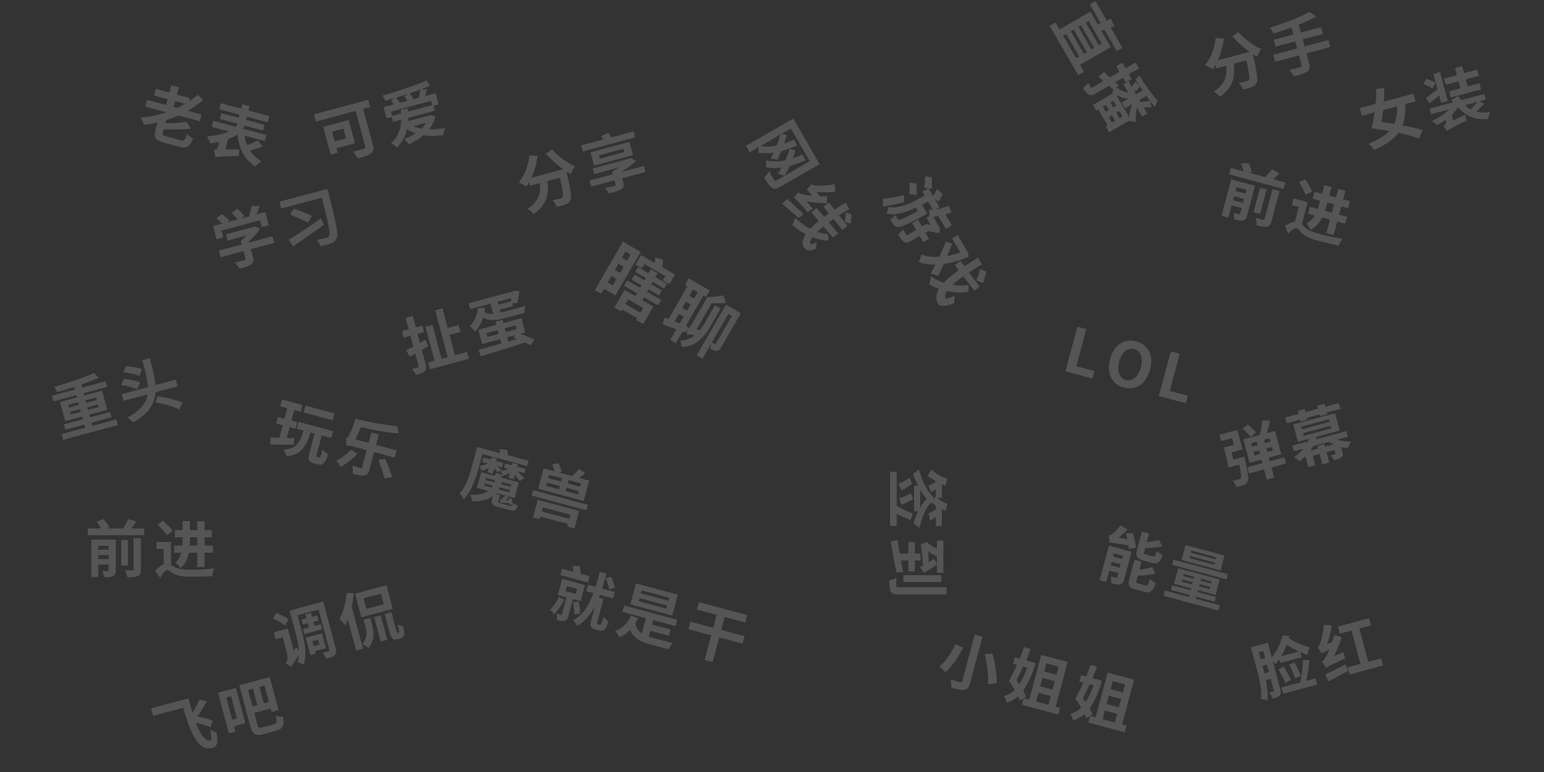
<style>
.page{position:relative;width:1544px;height:772px;background:#333333}
.page>*{position:absolute;margin:0}
.t1{font:62.3px "NotoSansHans-Bold";letter-spacing:0.1em;color:#555555}
.t2{font:69.9px "NotoSansHans-Bold";letter-spacing:0.1em;color:#555555}
</style>
<div class="page">
<p class="t1" style="left:1049px;top:1px;width:109px;height:132px;rotate:60deg">直播</p>
<p class="t1" style="left:1205px;top:12px;width:126px;height:85px;rotate:-15deg">分手</p>
<p class="t1" style="left:1360px;top:66px;width:131px;height:85px;rotate:-15deg">女装</p>
<p class="t1" style="left:141px;top:85px;width:128px;height:82px;rotate:15deg">老表</p>
<p class="t1" style="left:313px;top:80px;width:133px;height:79px;rotate:-15deg">可爱</p>
<p class="t1" style="left:746px;top:118px;width:106px;height:133px;rotate:60deg">网线</p>
<p class="t1" style="left:519px;top:131px;width:127px;height:84px;rotate:-15deg">分享</p>
<p class="t1" style="left:1222px;top:163px;width:128px;height:83px;rotate:15deg">前进</p>
<p class="t1" style="left:883px;top:176px;width:104px;height:131px;rotate:60deg">游戏</p>
<p class="t1" style="left:213px;top:188px;width:124px;height:81px;rotate:-15deg">学习</p>
<p class="t2" style="left:595px;top:242px;width:146px;height:117px;rotate:30deg">瞎聊</p>
<p class="t1" style="left:402px;top:290px;width:132px;height:85px;rotate:-15deg">扯蛋</p>
<p class="t1" style="left:1066px;top:327px;width:122px;height:77px;rotate:15deg">LOL</p>
<p class="t1" style="left:52px;top:358px;width:131px;height:82px;rotate:-15deg">重头</p>
<p class="t1" style="left:270px;top:399px;width:129px;height:80px;rotate:15deg">玩乐</p>
<p class="t1" style="left:1219px;top:403px;width:132px;height:84px;rotate:-15deg">弹幕</p>
<p class="t1" style="left:459px;top:447px;width:131px;height:82px;rotate:15deg">魔兽</p>
<p class="t1" style="left:890px;top:469px;width:57px;height:126px;rotate:90deg">签到</p>
<p class="t1" style="left:87px;top:519px;width:128px;height:59px">前进</p>
<p class="t1" style="left:1100px;top:525px;width:128px;height:86px;rotate:15deg">能量</p>
<p class="t1" style="left:550px;top:565px;width:197px;height:98px;rotate:15deg">就是干</p>
<p class="t1" style="left:273px;top:585px;width:132px;height:82px;rotate:-15deg">调侃</p>
<p class="t1" style="left:1251px;top:618px;width:133px;height:83px;rotate:-15deg">脸红</p>
<p class="t1" style="left:939px;top:635px;width:195px;height:98px;rotate:15deg">小姐姐</p>
<p class="t1" style="left:151px;top:677px;width:133px;height:72px;rotate:-15deg">飞吧</p>
</div>
